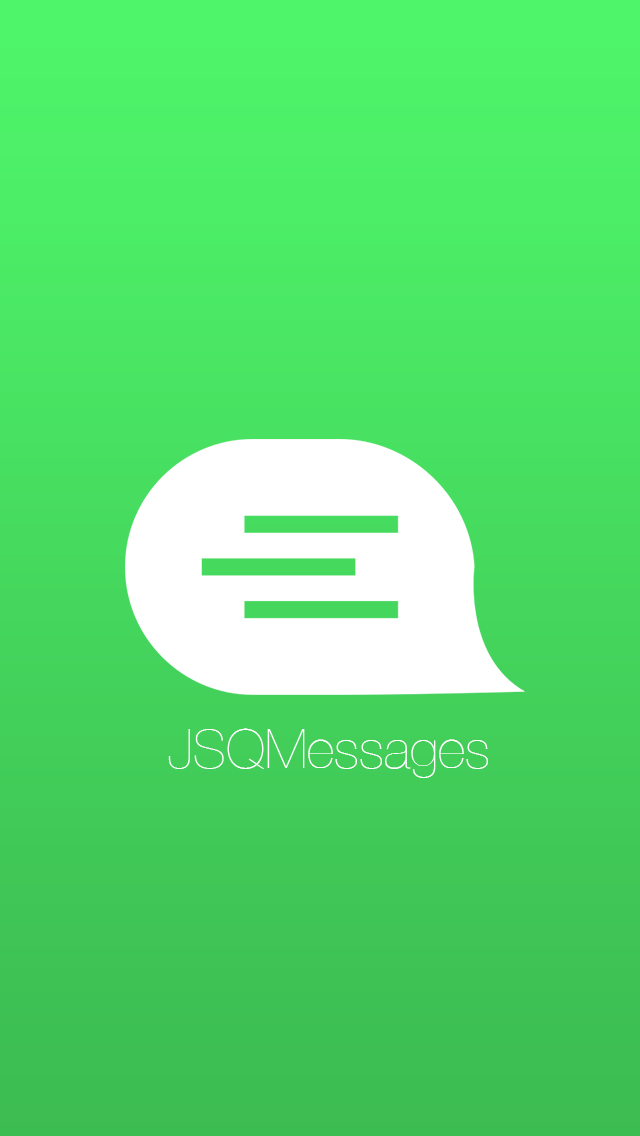
<style>
.page{position:relative;width:640px;height:1136px}
.page>*{position:absolute;margin:0}
.t1{font:54px "HelveticaNeue-UltraLight";color:#ffffff}
</style>
<div class="page">
<p class="t1" style="left:168px;top:728px;width:320px;height:50px">JSQMessages</p>
</div>
